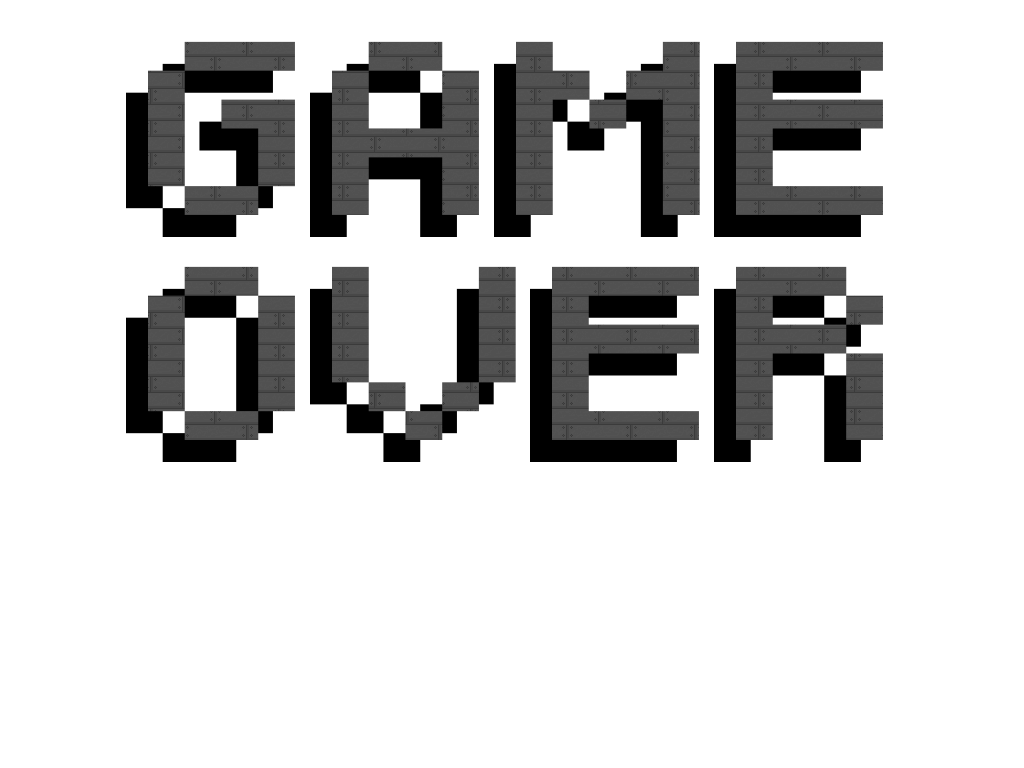
<style>
.page{position:relative;width:1024px;height:768px;background:#ffffff}
.page>*{position:absolute;margin:0}
.t1{font:144.3px/224.5px "Pixeled";color:#000000;scale:1.27 1}
</style>
<div class="page">
<p class="t1" style="left:126px;top:63px;width:735px;height:399px;text-align:center">GAME<br>OVER</p>
</div>
